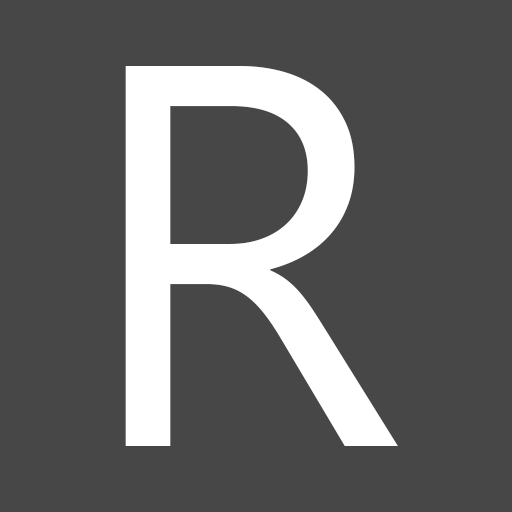
<style>
.page{position:relative;width:512px;height:512px;background:#474747}
.page>*{position:absolute;margin:0}
.t1{font:541.7px "SegoeUI";color:#ffffff}
</style>
<div class="page">
<p class="t1" style="left:125px;top:66px;width:273px;height:380px">R</p>
</div>
